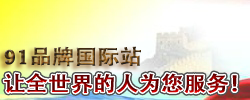
<style>
.page{position:relative;width:250px;height:100px}
.page>*{position:absolute;margin:0}
.t1{font:20.6px "AdobeHeitiStd-Regular";font-weight:bold;scale:1.07 1}
</style>
<div class="page">
<p class="t1" style="left:4px;top:73px;width:233px;height:20px">让全世界的人为您服务！</p>
</div>
